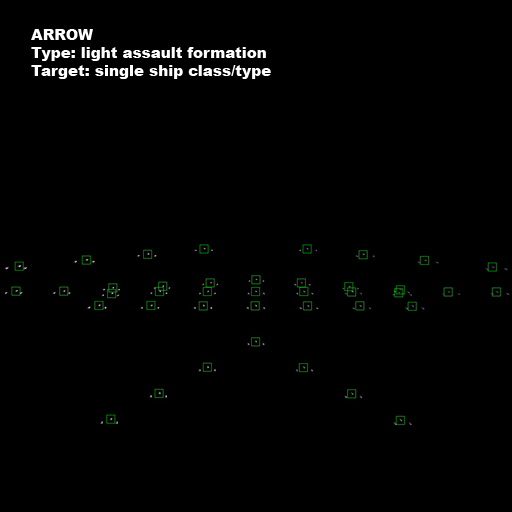
<style>
.page{position:relative;width:512px;height:512px;background:#000000}
.page>*{position:absolute;margin:0}
.t1{font:15px "Arial-Black";color:#ffffff}
</style>
<div class="page">
<p class="t1" style="left:31px;top:29px;width:240px;height:50px">ARROW<br>Type: light assault formation<br>Target: single ship class/type</p>
</div>
